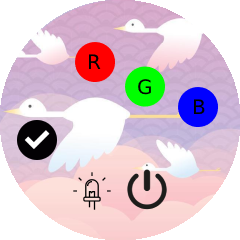
<style>
.page{position:relative;width:240px;height:240px;background:#ffffff}
.page>*{position:absolute;margin:0}
.t1{font:20px "DejaVuSans";color:#000000}
</style>
<div class="page">
<p class="t1" style="left:88px;top:54px;width:13px;height:15px">R</p>
<p class="t1" style="left:138px;top:79px;width:13px;height:16px">G</p>
<p class="t1" style="left:193px;top:99px;width:12px;height:15px">B</p>
</div>
